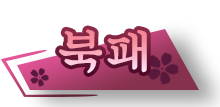
<style>
.page{position:relative;width:220px;height:107px;background:#ffffff}
.page>*{position:absolute;margin:0}
.t1{font:48.9px "SDKukdetopokki-aLt";letter-spacing:0.06em}
</style>
<div class="page">
<p class="t1" style="left:59px;top:29px;width:88px;height:44px">북패</p>
</div>
